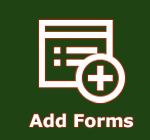
<style>
.page{position:relative;width:150px;height:140px;background:#204313}
.page>*{position:absolute;margin:0}
.t1{font:17.4px "Verdana-Bold";color:#fefffd}
</style>
<div class="page">
<p class="t1" style="left:29px;top:113px;width:104px;height:15px">Add Forms</p>
</div>
